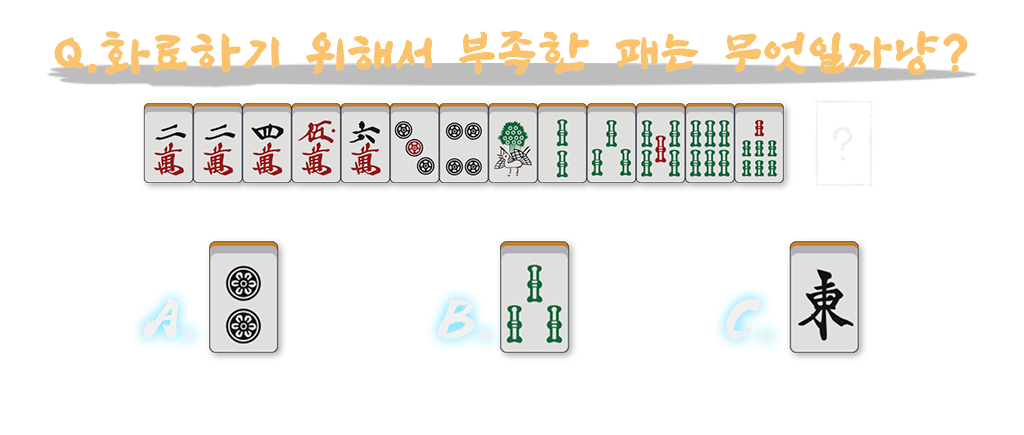
<style>
.page{position:relative;width:1024px;height:435px;background:#ffffff}
.page>*{position:absolute;margin:0}
.t1{font:48px "SangSangRockOTF";letter-spacing:0.06em;color:#fac26a;font-weight:bold}
</style>
<div class="page">
<p class="t1" style="left:54px;top:30px;width:914px;height:45px">Q.화료하기 위해서 부족한 패는 무엇일까냥?</p>
</div>
